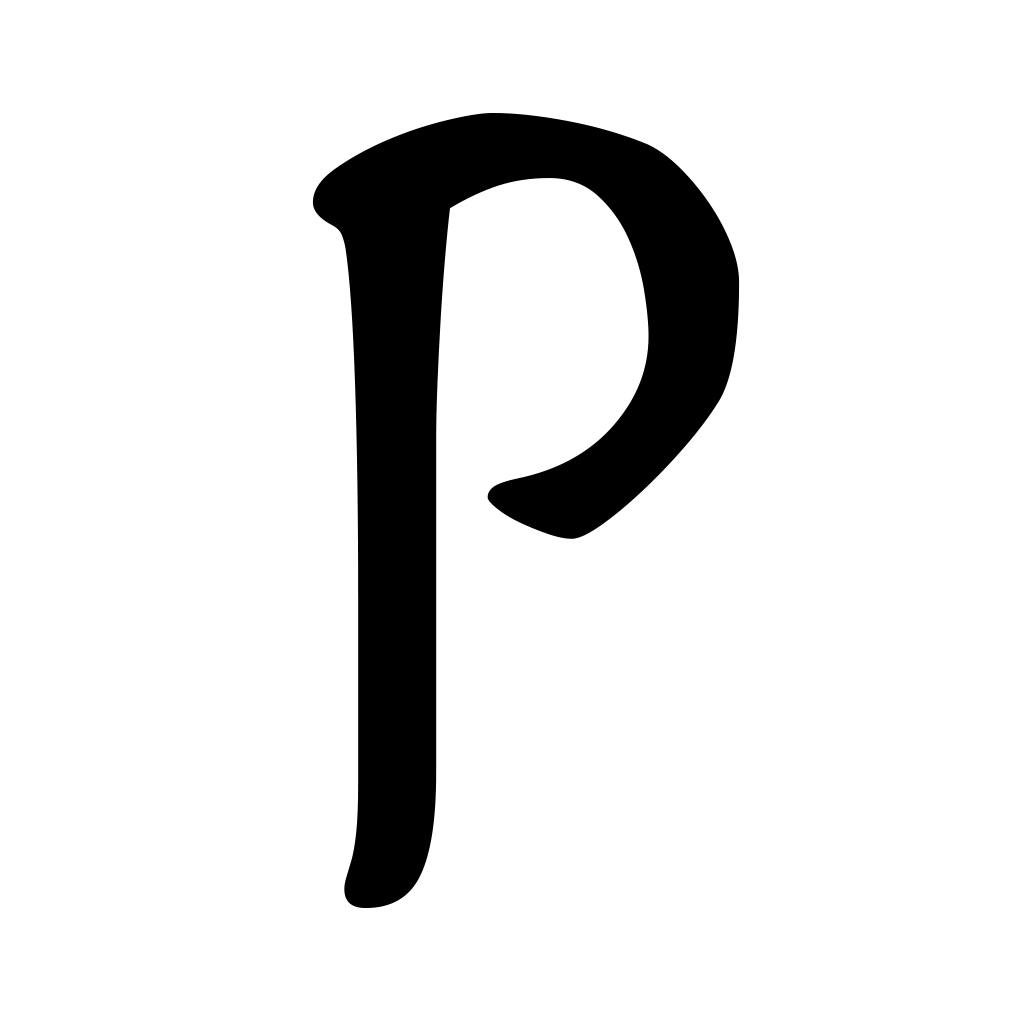
<style>
.page{position:relative;width:1024px;height:1024px;background:#ffffff}
.page>*{position:absolute;margin:0}
.t1{font:1257px "Herculanum";color:#000000}
</style>
<div class="page">
<p class="t1" style="left:312px;top:113px;width:428px;height:795px">P</p>
</div>
